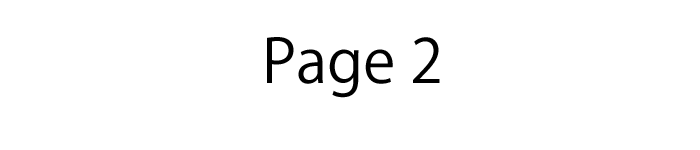
<style>
.page{position:relative;width:700px;height:150px;background:#ffffff}
.page>*{position:absolute;margin:0}
.t1{font:60px "KozGoPr6N-Regular";color:#000000}
</style>
<div class="page">
<p class="t1" style="left:267px;top:37px;width:173px;height:61px">Page 2</p>
</div>
